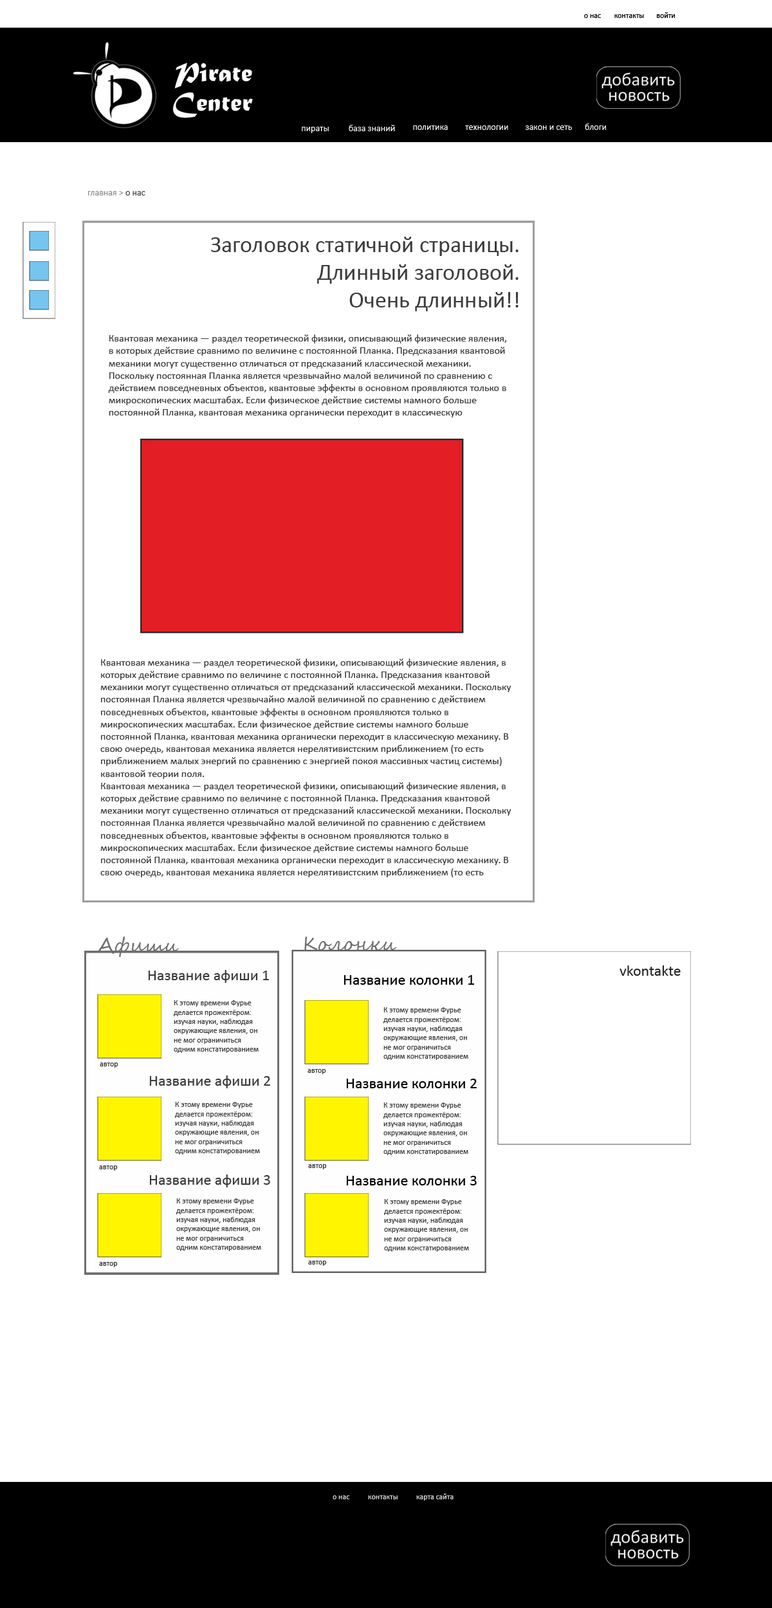
<style>
.page{position:relative;width:772px;height:1608px;background:#ffffff}
.page>*{position:absolute;margin:0}
.t1{font:7.7px "Calibri";color:#000000}
.t2{font:9px "Calibri";color:#ffffff}
.t3{font:9px "Calibri";color:#8c8b8c}
.t4{font:9px "Calibri";color:#3d3d3d}
.t5{font:23.1px "Calibri";color:#3c3b3b}
.t6{font:10.3px "Calibri";color:#3d3d3d}
.t7{font:10.3px "Calibri";color:#313131}
.t8{font:10.3px "Calibri";color:#323232}
.t9{font:19.3px "SegoeScript";color:#6f6d6d}
.t10{font:15.4px "Calibri";color:#272727}
.t11{font:15.4px "Calibri";color:#3c3b3b}
.t12{font:15.4px "Calibri";color:#000000}
.t13{font:7.7px "Calibri";color:#3d3d3d}
.t14{font:7.7px "Calibri";color:#3c3b3b}
.t15{font:7.7px "Calibri";color:#323232}
.t16{font:7.7px "Calibri";color:#dedede}
</style>
<div class="page">
<p class="t1" style="left:584px;top:14px;width:17px;height:4px">о нас</p>
<p class="t1" style="left:614px;top:14px;width:30px;height:4px">контакты</p>
<p class="t1" style="left:657px;top:12px;width:18px;height:6px">войти</p>
<p class="t2" style="left:349px;top:125px;width:46px;height:6px">база знаний</p>
<p class="t2" style="left:413px;top:125px;width:35px;height:5px">политика</p>
<p class="t2" style="left:465px;top:125px;width:43px;height:5px">технологии</p>
<p class="t2" style="left:525px;top:125px;width:47px;height:5px">закон и сеть</p>
<p class="t2" style="left:584px;top:123px;width:22px;height:7px">блоги</p>
<p class="t2" style="left:302px;top:127px;width:27px;height:6px">пираты</p>
<p class="t3" style="left:88px;top:191px;width:57px;height:4px">главная &gt; <span class="t4">о нас</span></p>
<p class="t5" style="left:211px;top:237px;width:307px;height:74px;text-align:right">Заголовок статичной страницы.<br> Длинный заголовой.<br> Очень длинный!!</p>
<p class="t6" style="left:108px;top:334px;width:398px;height:83px">Ква́нтовая меха́ника — раздел теоретической физики, описывающий физические явления, в которых действие сравнимо по величине с постоянной Планка. Предсказания квантовой механики могут существенно отличаться от предсказаний классической механики. Поскольку постоянная Планка является чрезвычайно малой величиной по сравнению с действием повседневных объектов, квантовые эффекты в основном проявляются только в микроскопических масштабах. Если физическое действие системы намного больше постоянной Планка, квантовая механика органически переходит в классическую<span class="t7"> механику. В свою очередь, квантовая механика является нерелятивистским приближением (то есть приближением малых энергий по сравнению с энергией покоя массивных частиц системы) квантовой теории поля.</span></p>
<p class="t6" style="left:100px;top:658px;width:411px;height:219px">Ква́нтовая меха́ника — раздел теоретической физики, описывающий физические явления, в которых действие сравнимо по величине с постоянной Планка. Предсказания квантовой механики могут существенно отличаться от предсказаний классической механики. Поскольку постоянная Планка является чрезвычайно малой величиной по сравнению с действием повседневных объектов, квантовые эффекты в основном проявляются только в микроскопических масштабах. Если физическое действие системы намного больше постоянной Планка, квантовая механика органически переходит в классическую механику. В свою очередь, квантовая механика является нерелятивистским приближением (то есть приближением малых энергий по сравнению с энергией покоя массивных частиц системы) квантовой теории поля.<br>Ква́нтовая меха́ника — раздел теоретической физики, описывающий физические явления, в которых действие сравнимо по величине с постоянной Планка. Предсказания квантовой механики могут существенно отличаться от предсказаний классической механики. Поскольку постоянная Планка является чрезвычайно малой величиной по сравнению с действием повседневных объектов, квантовые эффекты в основном проявляются только в микроскопических масштабах. Если физическое действие системы намного больше постоянной Планка, квантовая механика органически переходит в классическую механику. В свою очередь, квантовая механика является нерелятивистским приближением (то есть<span class="t8"> приближением малых энергий по сравнению с энергией покоя массивных частиц системы) квантовой теории поля.</span></p>
<p class="t9" style="left:98px;top:936px;width:81px;height:21px">Афиши</p>
<p class="t9" style="left:304px;top:936px;width:93px;height:15px">Колонки</p>
<p class="t10" style="left:619px;top:965px;width:61px;height:10px">vkontakte</p>
<p class="t11" style="left:148px;top:970px;width:121px;height:13px">Название афиши 1</p>
<p class="t12" style="left:343px;top:975px;width:131px;height:9px">Название колонки 1</p>
<p class="t13" style="left:174px;top:1000px;width:84px;height:53px">К этому времени Фурье делается прожектёром: изучая науки, наблюдая окружающие явления, он не мог ограничиться одним констатированием<span class="t14"> встречавшихся несовершенств или даже только критикой их</span></p>
<p class="t13" style="left:383px;top:1007px;width:85px;height:53px">К этому времени Фурье делается прожектёром: изучая науки, наблюдая окружающие явления, он не мог ограничиться одним констатированием<span class="t14"> встречавшихся несовершенств или даже только критикой их</span></p>
<p class="t15" style="left:100px;top:1062px;width:18px;height:5px">автор</p>
<p class="t15" style="left:307px;top:1069px;width:19px;height:5px">автор</p>
<p class="t11" style="left:149px;top:1075px;width:121px;height:13px">Название афиши 2</p>
<p class="t12" style="left:346px;top:1078px;width:130px;height:10px">Название колонки 2</p>
<p class="t13" style="left:175px;top:1101px;width:85px;height:53px">К этому времени Фурье делается прожектёром: изучая науки, наблюдая окружающие явления, он не мог ограничиться одним констатированием <span class="t14">встречавшихся несовершенств или даже только критикой их</span></p>
<p class="t13" style="left:383px;top:1102px;width:85px;height:53px">К этому времени Фурье делается прожектёром: изучая науки, наблюдая окружающие явления, он не мог ограничиться одним констатированием<span class="t14"> встречавшихся несовершенств или даже только критикой их</span></p>
<p class="t15" style="left:99px;top:1165px;width:19px;height:5px">автор</p>
<p class="t15" style="left:308px;top:1164px;width:19px;height:5px">автор</p>
<p class="t11" style="left:149px;top:1174px;width:121px;height:13px">Название афиши 3</p>
<p class="t12" style="left:346px;top:1175px;width:130px;height:10px">Название колонки 3</p>
<p class="t13" style="left:176px;top:1198px;width:85px;height:53px">К этому времени Фурье делается прожектёром: изучая науки, наблюдая окружающие явления, он не мог ограничиться одним констатированием<span class="t14"> встречавшихся несовершенств или даже только критикой их</span></p>
<p class="t13" style="left:384px;top:1199px;width:85px;height:52px">К этому времени Фурье делается прожектёром: изучая науки, наблюдая окружающие явления, он не мог ограничиться одним констатированием<span class="t14"> встречавшихся несовершенств или даже только критикой их</span></p>
<p class="t15" style="left:99px;top:1262px;width:19px;height:5px">автор</p>
<p class="t15" style="left:308px;top:1260px;width:19px;height:5px">автор</p>
<p class="t16" style="left:416px;top:1493px;width:37px;height:7px">карта сайта</p>
<p class="t16" style="left:332px;top:1495px;width:18px;height:4px">о нас</p>
<p class="t16" style="left:368px;top:1495px;width:29px;height:4px">контакты</p>
</div>
